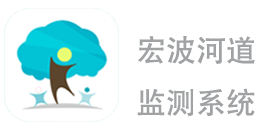
<style>
.page{position:relative;width:261px;height:122px;background:#ffffff}
.page>*{position:absolute;margin:0}
.t1{font:30px "AdobeHeitiStd-Regular";color:#a0a2a4}
</style>
<div class="page">
<p class="t1" style="left:137px;top:36px;width:118px;height:81px">宏波河道<br>监测系统</p>
</div>
